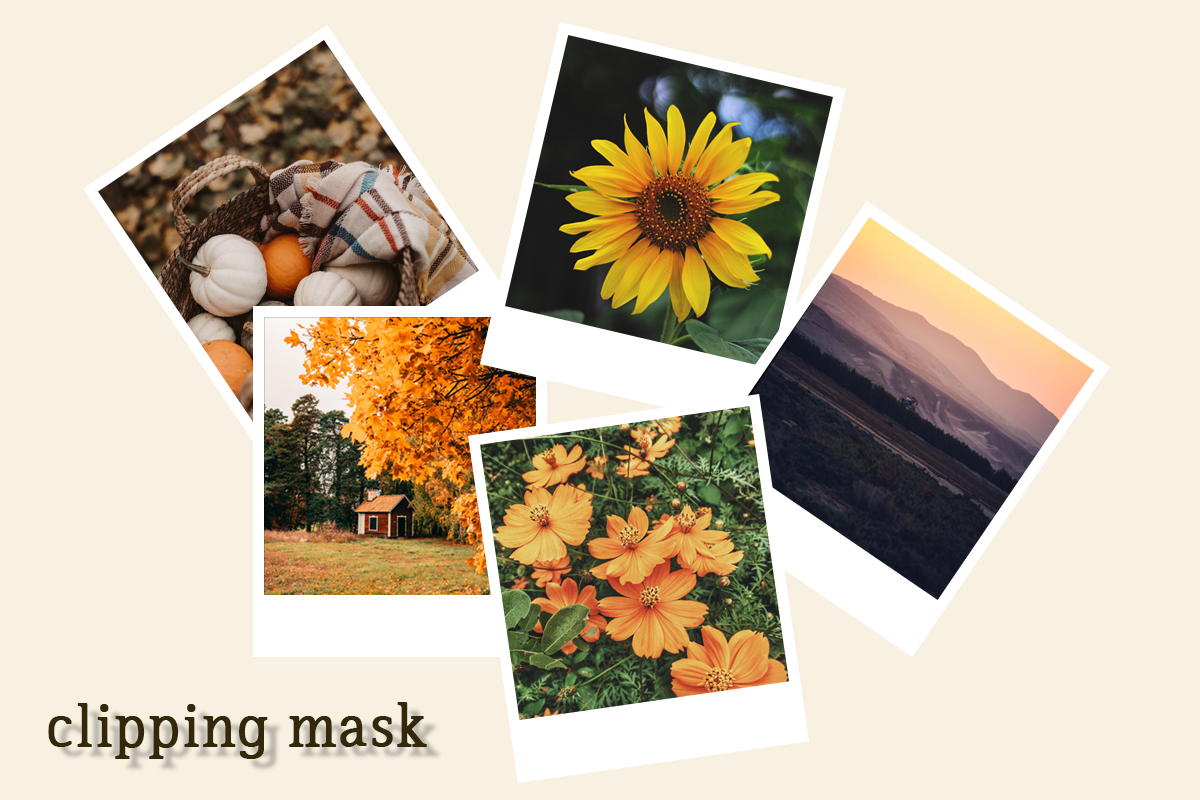
<style>
.page{position:relative;width:1200px;height:800px;background:#f8f1e2}
.page>*{position:absolute;margin:0}
.t1{font:60px "IropkeBatangM";color:#34280a;font-weight:bold}
</style>
<div class="page">
<p class="t1" style="left:48px;top:702px;width:379px;height:57px">clipping mask</p>
</div>
